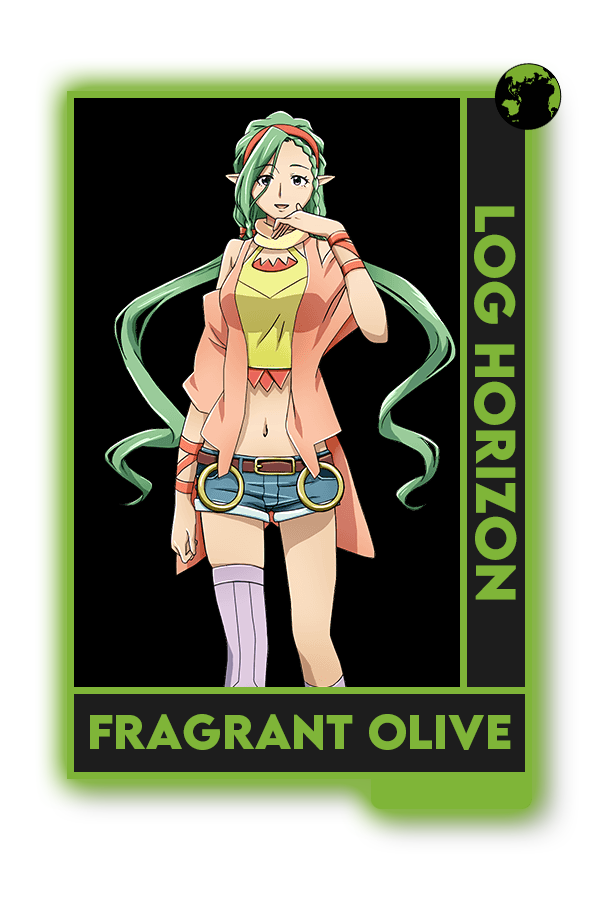
<style>
.page{position:relative;width:600px;height:900px;background:#000000}
.page>*{position:absolute;margin:0}
.t1{font:50px "LEMONMILK-Bold";color:#7fad41}
.t2{font:43.5px "LEMONMILK-Bold";color:#7fad41}
</style>
<div class="page">
<p class="t1" style="left:474px;top:206px;width:43px;height:394px;rotate:90deg">Log Horizon</p>
<p class="t2" style="left:90px;top:714px;width:421px;height:36px">Fragrant Olive</p>
</div>
